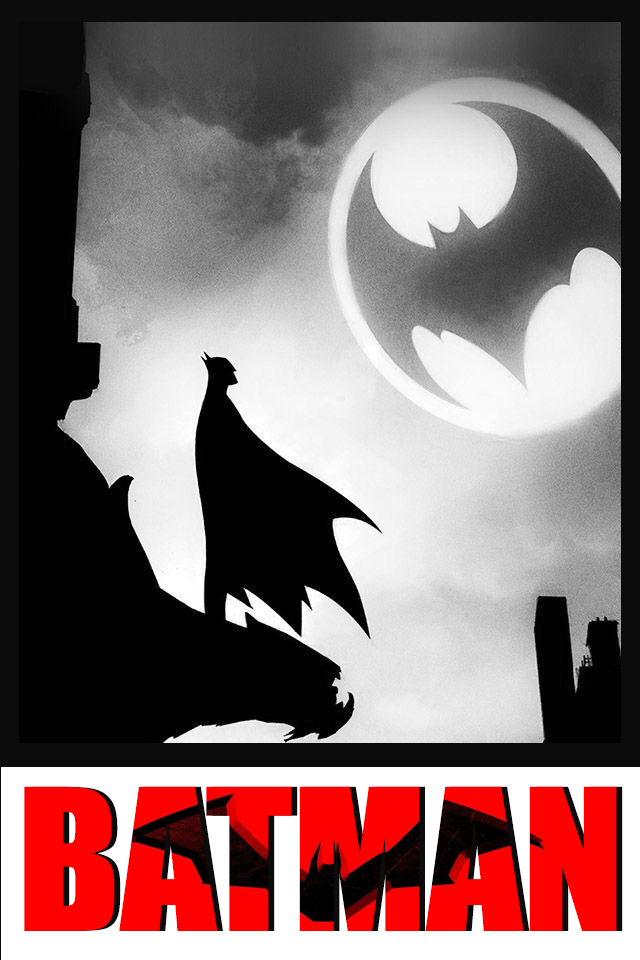
<style>
.page{position:relative;width:640px;height:960px}
.page>*{position:absolute;margin:0}
.t1{font:182.2px "Impact";color:#fe0000;scale:1.03 1}
.t2{font:182.2px "Impact";scale:1.03 1}
</style>
<div class="page">
<p class="t1" style="left:24px;top:786px;width:593px;height:145px">BATMAN</p>
<p class="t2" style="left:30px;top:786px;width:593px;height:145px">BATMAN</p>
</div>
